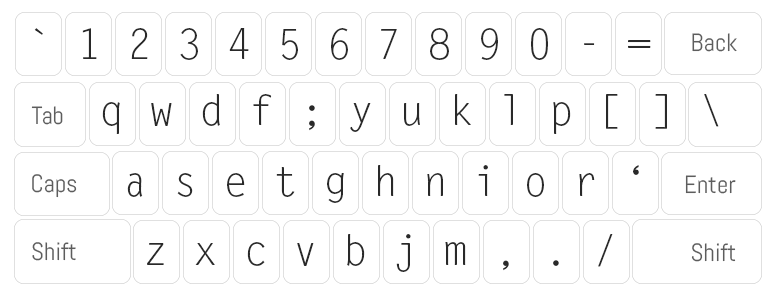
<style>
.page{position:relative;width:780px;height:292px;background:#ffffff}
.page>*{position:absolute;margin:0}
.t1{font:41.7px "LetterGothicStd";color:#292929}
.t2{font:25px "Abel-Regular";color:#5d5d5d}
</style>
<div class="page">
<p class="t1" style="left:34px;top:28px;width:617px;height:32px">` 1 2 3 4 5 6 7 8 9 0 - =</p>
<p class="t2" style="left:692px;top:33px;width:45px;height:19px">Back</p>
<p class="t1" style="left:102px;top:94px;width:617px;height:40px">q w d f ; y u k l p [ ] \</p>
<p class="t2" style="left:31px;top:106px;width:32px;height:19px">Tab</p>
<p class="t2" style="left:32px;top:174px;width:45px;height:24px">Caps</p>
<p class="t1" style="left:127px;top:165px;width:512px;height:38px">a s e t g h n i o r ‘</p>
<p class="t2" style="left:685px;top:175px;width:51px;height:19px">Enter</p>
<p class="t2" style="left:32px;top:242px;width:44px;height:19px">Shift</p>
<p class="t1" style="left:147px;top:234px;width:466px;height:38px">z x c v b j m , . /</p>
<p class="t2" style="left:691px;top:243px;width:45px;height:19px">Shift</p>
</div>
